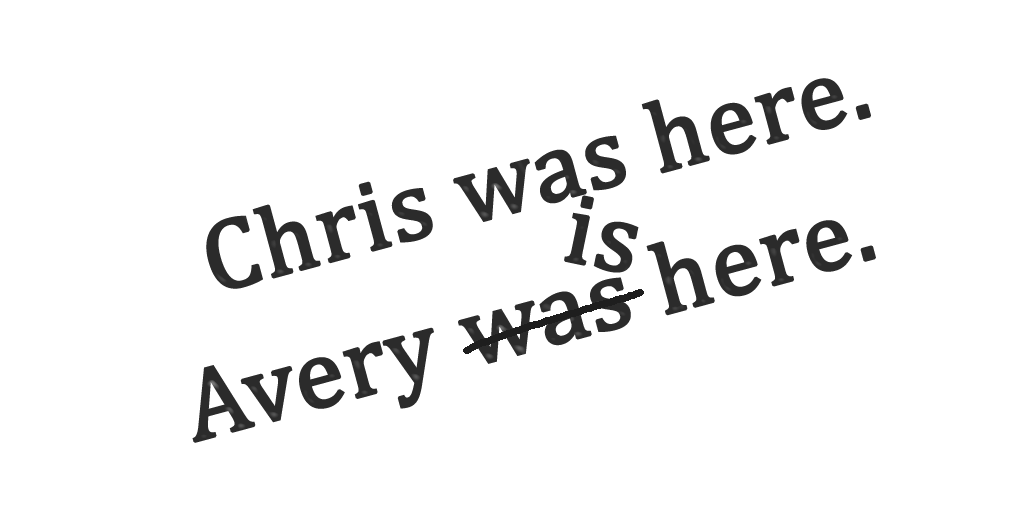
<style>
.page{position:relative;width:1024px;height:512px;background:#ffffff}
.page>*{position:absolute;margin:0}
.t1{font:100px "CambriaMath";color:#2b2b2b;font-weight:bold}
</style>
<div class="page">
<p class="t1" style="left:206px;top:78px;width:665px;height:211px;rotate:-15deg">Chris was here.</p>
<p class="t1" style="left:564px;top:195px;width:75px;height:78px;rotate:12deg">is</p>
<p class="t1" style="left:192px;top:220px;width:684px;height:223px;rotate:-15deg">Avery was here.</p>
</div>
